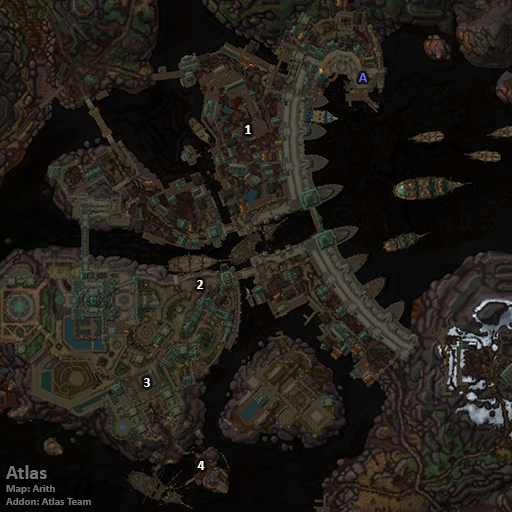
<style>
.page{position:relative;width:512px;height:512px}
.page>*{position:absolute;margin:0}
.t1{font:14px "Calibri-Bold";color:#6666ff}
.t2{font:14px "Calibri-Bold";color:#ffffff}
.t3{font:11px "Calibri-Bold";color:#757675}
.t4{font:20px "Calibri-Bold";color:#757675}
</style>
<div class="page">
<p class="t1" style="left:358px;top:73px;width:9px;height:9px">A</p>
<p class="t2" style="left:245px;top:125px;width:6px;height:9px">1</p>
<p class="t2" style="left:197px;top:280px;width:7px;height:9px">2</p>
<p class="t2" style="left:144px;top:378px;width:6px;height:9px">3</p>
<p class="t2" style="left:197px;top:461px;width:8px;height:9px">4</p>
<p class="t3" style="left:6px;top:465px;width:85px;height:40px"><span class="t4">Atlas<br></span>Map: Arith<br>Addon: Atlas Team</p>
</div>
